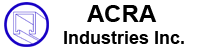
<style>
.page{position:relative;width:200px;height:50px;background:#ffffff}
.page>*{position:absolute;margin:0}
.t1{font:18px "Arial-BoldMT";color:#000000}
.t2{font:24px "Arial-BoldMT";color:#000000}
</style>
<div class="page">
<p class="t1" style="left:64px;top:5px;width:120px;height:39px;text-align:center"><span class="t2">ACRA</span> <br>Industries Inc.</p>
</div>
